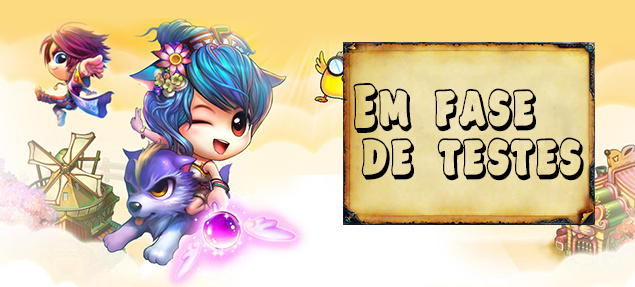
<style>
.page{position:relative;width:635px;height:287px}
.page>*{position:absolute;margin:0}
.t1{font:61.5px "Beefcakes-Shadow";letter-spacing:0.005em;color:#000000;scale:0.67 1}
</style>
<div class="page">
<p class="t1" style="left:353px;top:83px;width:231px;height:98px">Em   fase<br> de   testes</p>
</div>
